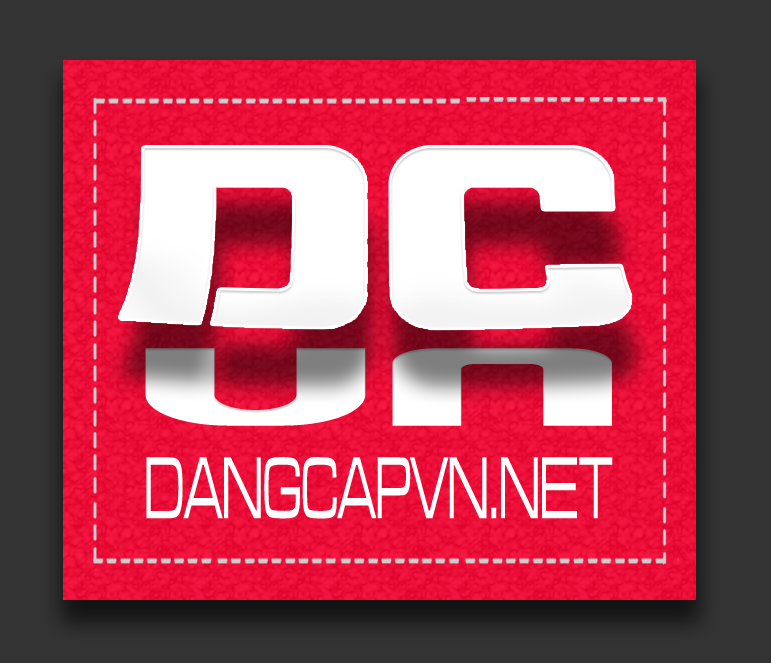
<style>
.page{position:relative;width:771px;height:663px;background:#333333}
.page>*{position:absolute;margin:0}
.t1{font:133.5px "BlasterInfinite";scale:2.67 1}
.t2{font:91.1px "HP-Dan-Truong-Regular";color:#fffefe;scale:0.48 1}
</style>
<div class="page">
<p class="t1" style="left:145px;top:348px;width:467px;height:78px">VN</p>
<p class="t2" style="left:146px;top:457px;width:467px;height:62px">DANGCAPVN.NET</p>
</div>
